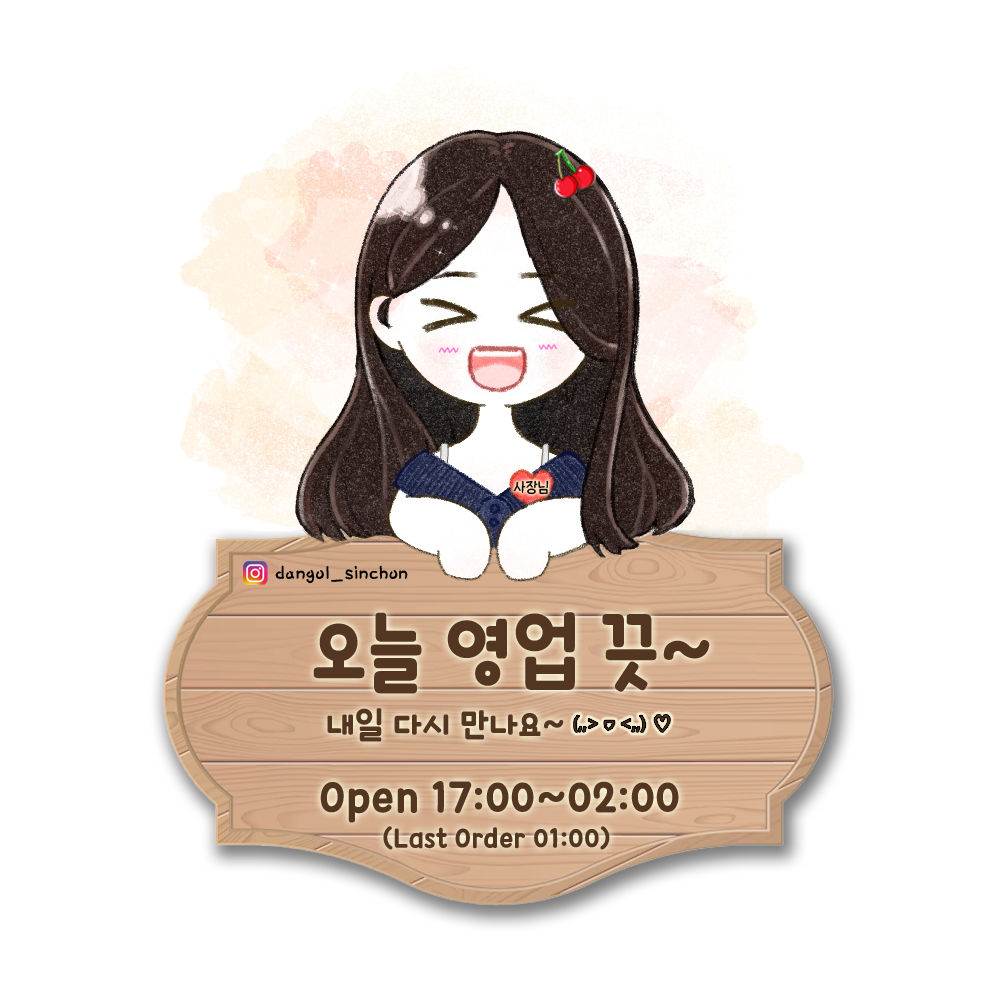
<style>
.page{position:relative;width:1000px;height:1000px;background:#ffffff}
.page>*{position:absolute;margin:0}
.t1{font:15px "THEMiss";color:#000000}
.t2{font:24px "Pix_HUFriend132";color:#000000}
.t3{font:85px "icTTHayanbunpilB";color:#533621}
.t4{font:36px "icTTHayanbunpilB";color:#533621}
.t5{font:48px "icTTHayanbunpilB";color:#533621}
.t6{font:30px "icTTHayanbunpilB";color:#533621}
</style>
<div class="page">
<p class="t1" style="left:513px;top:480px;width:36px;height:15px">사장님</p>
<p class="t2" style="left:275px;top:565px;width:133px;height:19px">dangol_sinchon</p>
<p class="t3" style="left:313px;top:612px;width:397px;height:82px">오늘 영업 끗~</p>
<p class="t4" style="left:327px;top:708px;width:237px;height:34px">내일 다시 만나요~</p>
<p class="t5" style="left:320px;top:781px;width:359px;height:42px">Open 17:00~02:00</p>
<p class="t6" style="left:383px;top:826px;width:227px;height:24px">(Last Order 01:00)</p>
</div>
